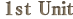
<style>
.page{position:relative;width:73px;height:19px;background:#ffffff}
.page>*{position:absolute;margin:0}
.t1{font:18px "RyuminPro-ExBold";letter-spacing:-0.04em;font-weight:bold}
.t2{font:18px "RyuminPro-ExBold";letter-spacing:0.04em;font-weight:bold}
</style>
<div class="page">
<p class="t1" style="left:5px;top:1px;width:69px;height:15px"><span class="t2">1st</span> Unit</p>
</div>
